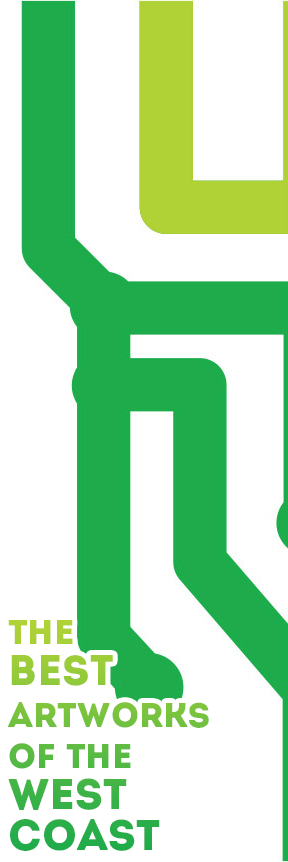
<style>
.page{position:relative;width:288px;height:862px;background:#ffffff}
.page>*{position:absolute;margin:0}
.t1{font:34.9px/41.2px "Intro"}
.t2{font:42.3px/41.2px "Intro"}
.t3{font:43.3px/41.2px "Intro"}
</style>
<div class="page">
<p class="t1" style="left:8px;top:620px;width:201px;height:231px">The <br><span class="t2">best  <br></span>ARTWORKs <br>of the<br><span class="t3">west <br>Coast</span></p>
</div>
